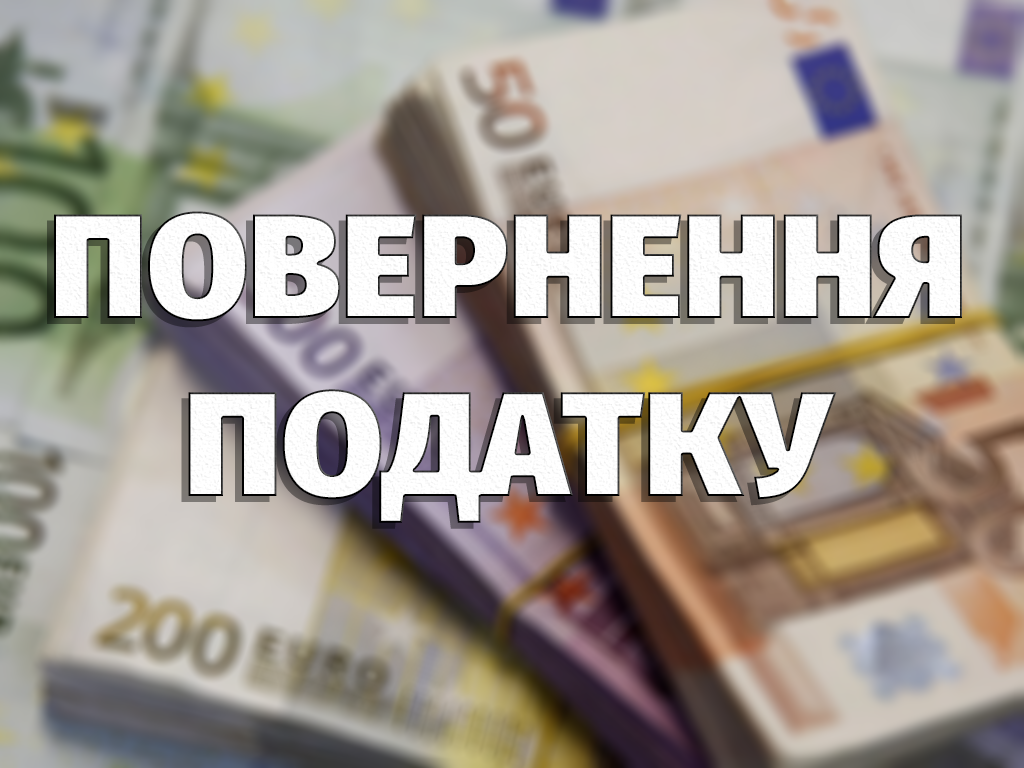
<style>
.page{position:relative;width:1024px;height:768px}
.page>*{position:absolute;margin:0}
.t1{font:148.2px "FiraSans-Ultra";color:#ffffff}
</style>
<div class="page">
<p class="t1" style="left:54px;top:211px;width:908px;height:312px;text-align:center">ПОВЕРНЕННЯ<br>ПОДАТКУ</p>
</div>
